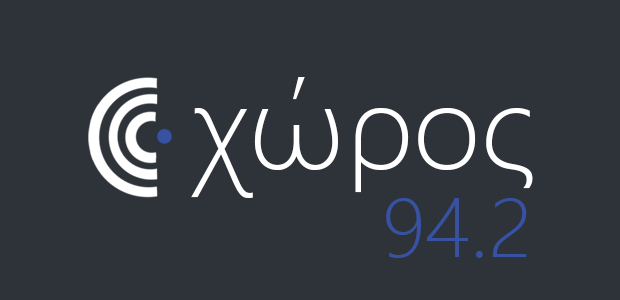
<style>
.page{position:relative;width:620px;height:300px;background:#2d3339}
.page>*{position:absolute;margin:0}
.t1{font:120.3px "SegoeUI-Light";color:#ffffff}
.t2{font:84.3px "SegoeUI-Light";color:#3852a3}
</style>
<div class="page">
<p class="t1" style="left:191px;top:77px;width:342px;height:121px">χώρος</p>
<p class="t2" style="left:386px;top:198px;width:141px;height:60px">94.2</p>
</div>
